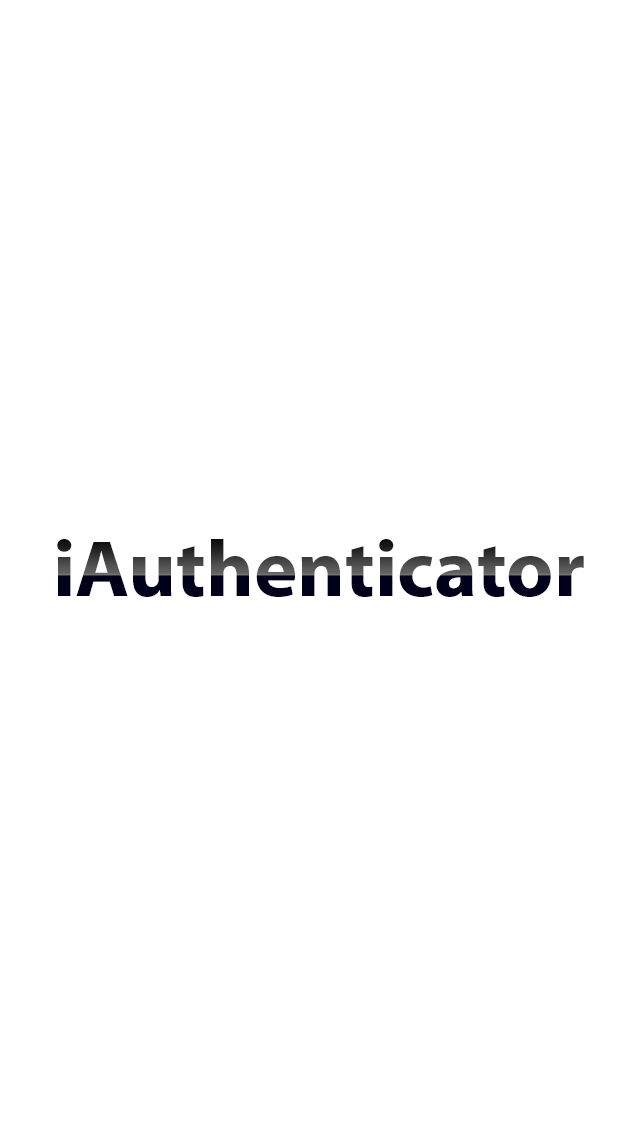
<style>
.page{position:relative;width:640px;height:1136px;background:#ffffff}
.page>*{position:absolute;margin:0}
.t1{font:80px "MyriadWebPro-Bold"}
</style>
<div class="page">
<p class="t1" style="left:57px;top:539px;width:527px;height:58px">iAuthenticator</p>
</div>
